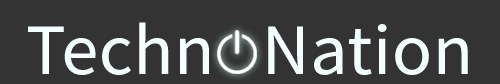
<style>
.page{position:relative;width:500px;height:84px;background:#333333}
.page>*{position:absolute;margin:0}
.t1{font:72px "SourceSansRoman-Regular";letter-spacing:0.01em;color:#f3fffe}
</style>
<div class="page">
<p class="t1" style="left:28px;top:22px;width:440px;height:53px">Techn   Nation</p>
</div>
